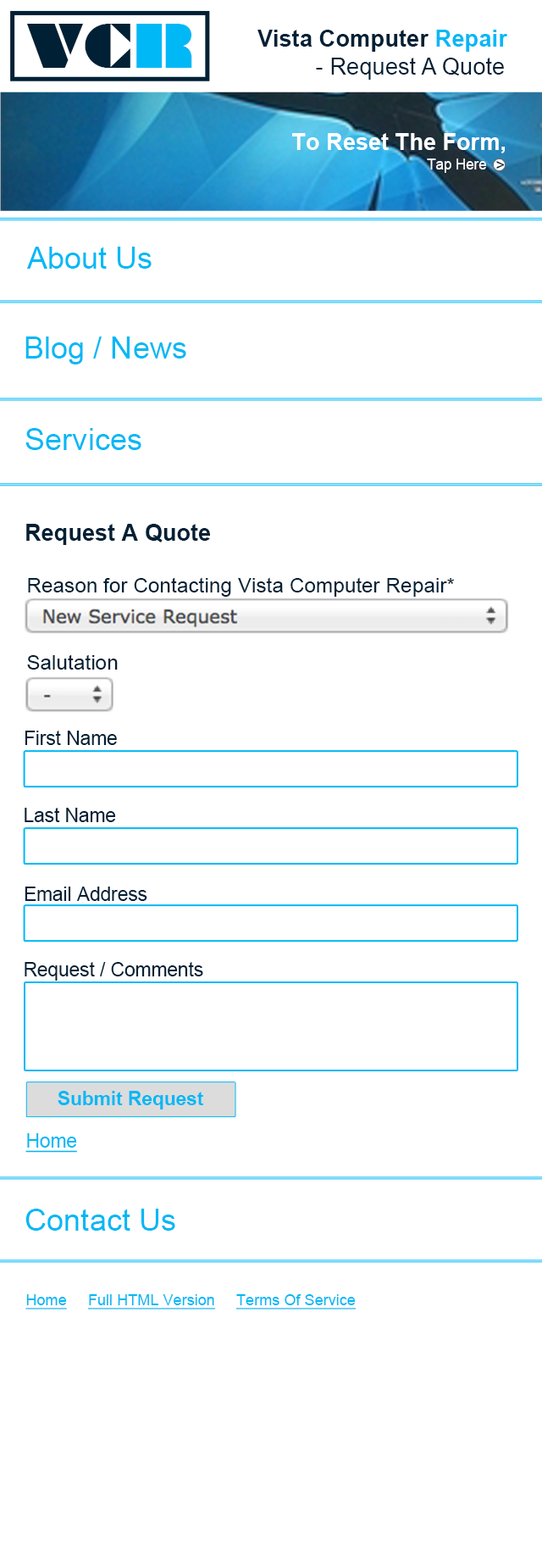
<style>
.page{position:relative;width:542px;height:1568px;background:#ffffff}
.page>*{position:absolute;margin:0}
.t1{font:57.4px "Braggadocio";color:#002035}
.t2{font:57.4px "Braggadocio";color:#00b8f5}
.t3{font:23.3px "ArialMT";color:#002035}
.t4{font:23.3px "Arial-BoldMT";color:#002035}
.t5{font:23.3px "Arial-BoldMT";color:#00b8f5}
.t6{font:23px "Arial-BoldMT";color:#ffffff}
.t7{font:15.4px "ArialMT";color:#ffffff;scale:0.93 1}
.t8{font:15.4px "ArialMT";color:#002035}
.t9{font:30.7px "ArialMT";color:#00b8f5}
.t10{font:23px "Arial-BoldMT";color:#002035}
.t11{font:20.7px "ArialMT";color:#002035}
.t12{font:19.2px "ArialMT";color:#002035}
.t13{font:19.2px "Arial-BoldMT";color:#00b8f5}
.t14{font:19.2px "ArialMT";color:#00b8f5;text-decoration:underline}
.t15{font:15.4px "ArialMT";color:#00b8f5;text-decoration:underline}
</style>
<div class="page">
<p class="t1" style="left:26px;top:24px;width:166px;height:44px">VC<span class="t2">R</span></p>
<p class="t3" style="left:258px;top:30px;width:251px;height:50px"><span class="t4">Vista Computer </span><span class="t5">Repair<br>         </span>- Request A Quote</p>
<p class="t6" style="left:292px;top:133px;width:213px;height:20px">To Reset The Form,</p>
<p class="t7" style="left:427px;top:158px;width:60px;height:15px">Tap Here</p>
<p class="t8" style="left:497px;top:161px;width:8px;height:8px">&gt;</p>
<p class="t9" style="left:27px;top:247px;width:125px;height:22px">About Us</p>
<p class="t9" style="left:25px;top:336px;width:161px;height:28px">Blog / News</p>
<p class="t9" style="left:25px;top:428px;width:117px;height:22px">Services</p>
<p class="t10" style="left:26px;top:524px;width:184px;height:21px">Request A Quote</p>
<p class="t11" style="left:28px;top:577px;width:426px;height:20px">Reason for Contacting Vista Computer Repair*</p>
<p class="t11" style="left:27px;top:654px;width:91px;height:16px">Salutation</p>
<p class="t12" style="left:25px;top:731px;width:92px;height:14px">First Name</p>
<p class="t12" style="left:25px;top:808px;width:91px;height:14px">Last Name</p>
<p class="t12" style="left:25px;top:887px;width:122px;height:14px">Email Address</p>
<p class="t12" style="left:25px;top:962px;width:178px;height:19px">Request / Comments</p>
<p class="t13" style="left:58px;top:1091px;width:146px;height:18px">Submit Request</p>
<p class="t14" style="left:25px;top:1133px;width:52px;height:20px">Home</p>
<p class="t9" style="left:25px;top:1209px;width:150px;height:22px">Contact Us</p>
<p class="t15" style="left:25px;top:1294px;width:331px;height:15px">Home     Full HTML Version     Terms Of Service</p>
</div>
